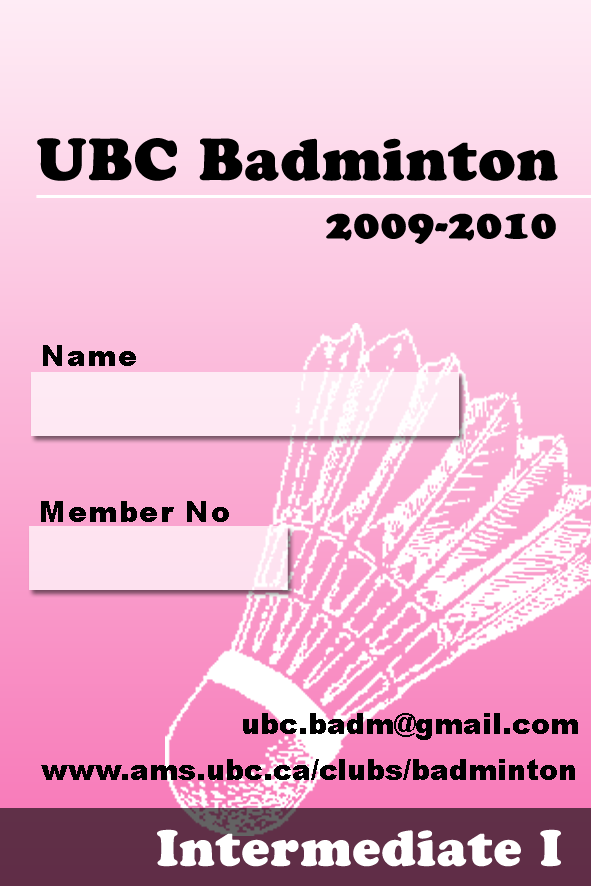
<style>
.page{position:relative;width:591px;height:886px}
.page>*{position:absolute;margin:0}
.t1{font:58.3px "CooperBlackStd";letter-spacing:0.025em;color:#000000}
.t2{font:41.7px "CooperBlackStd";letter-spacing:0.025em;color:#000000}
.t3{font:29.2px "Arial-Black";letter-spacing:0.05em;color:#000000}
.t4{font:29.2px "Arial-Black";color:#000000}
.t5{font:50px "CooperBlackStd";letter-spacing:0.025em;color:#ffffff}
</style>
<div class="page">
<p class="t1" style="left:37px;top:138px;width:521px;height:43px">UBC Badminton</p>
<p class="t2" style="left:326px;top:213px;width:230px;height:31px">2009-2010</p>
<p class="t3" style="left:43px;top:345px;width:93px;height:21px">Name</p>
<p class="t3" style="left:41px;top:501px;width:188px;height:21px">Member No</p>
<p class="t4" style="left:243px;top:713px;width:335px;height:27px">ubc.badm@gmail.com</p>
<p class="t4" style="left:41px;top:759px;width:534px;height:21px">www.ams.ubc.ca/clubs/badminton</p>
<p class="t5" style="left:157px;top:829px;width:404px;height:38px">Intermediate I</p>
</div>
